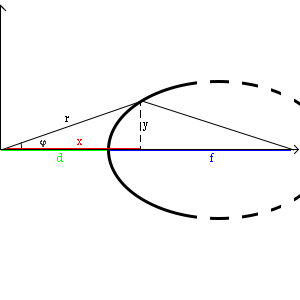
<style>
.page{position:relative;width:300px;height:300px;background:#ffffff}
.page>*{position:absolute;margin:0}
.t1{font:21px "CambriaMath";color:#000000}
.t2{font:21px "CambriaMath";color:#ff0000}
.t3{font:21px "CambriaMath";color:#00ff00}
.t4{font:21px "CambriaMath";color:#0000ff}
</style>
<div class="page">
<p class="t1" style="left:65px;top:116px;width:4px;height:6px">r</p>
<p class="t1" style="left:143px;top:122px;width:5px;height:9px">y</p>
<p class="t2" style="left:77px;top:139px;width:5px;height:6px">x</p>
<p class="t3" style="left:57px;top:153px;width:6px;height:9px">d</p>
<p class="t4" style="left:210px;top:153px;width:4px;height:9px">f</p>
</div>
